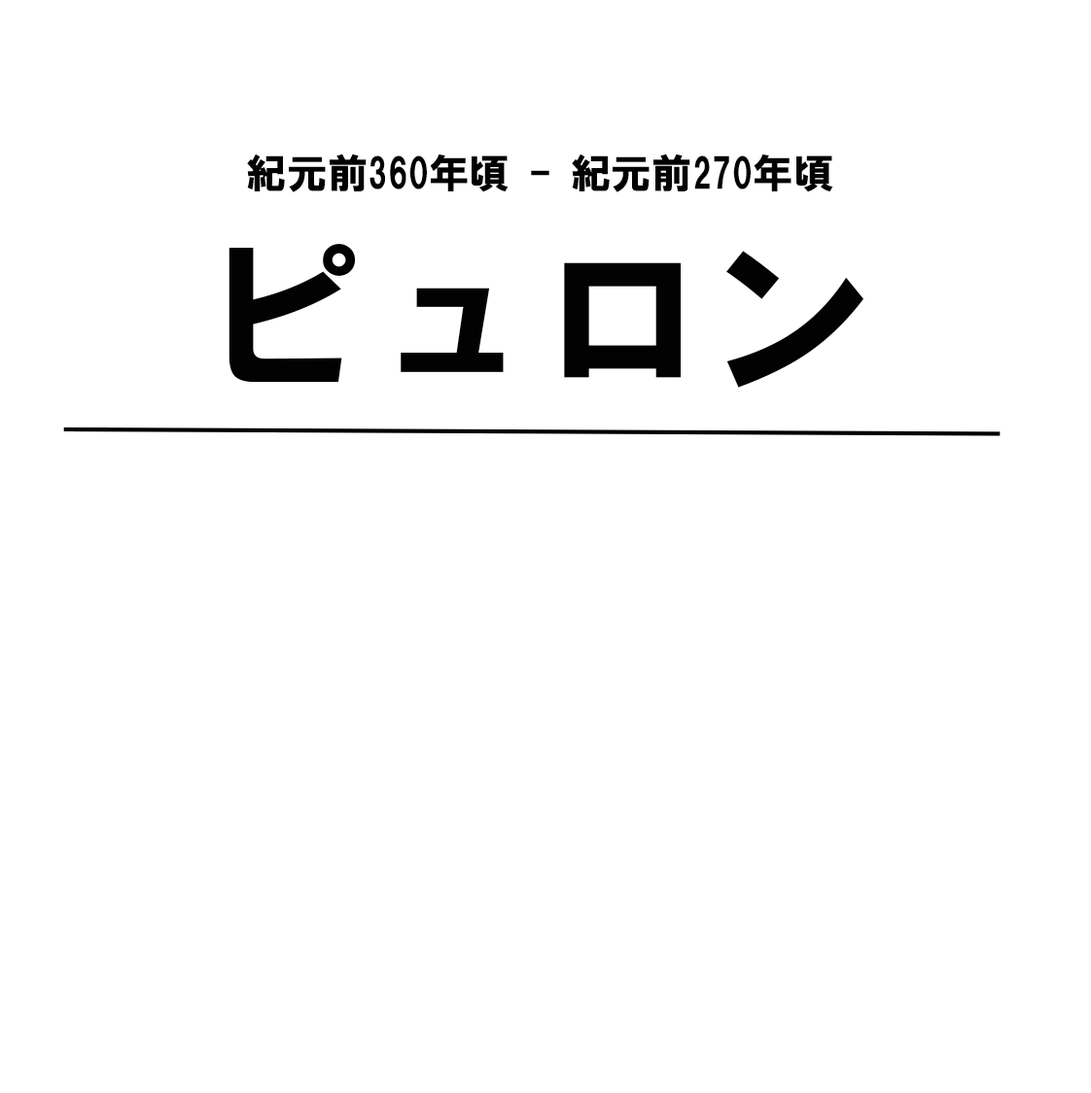
<style>
.page{position:relative;width:1091px;height:1093px;background:#ffffff}
.page>*{position:absolute;margin:0}
.t1{font:40.5px "HGSoeiKakugothicUB";color:#020202}
.t2{font:170.1px "HGSoeiKakugothicUB";color:#020202}
</style>
<div class="page">
<p class="t1" style="left:247px;top:154px;width:586px;height:38px">紀元前360年頃 - 紀元前270年頃</p>
<p class="t2" style="left:228px;top:244px;width:635px;height:144px">ピュロン</p>
</div>
